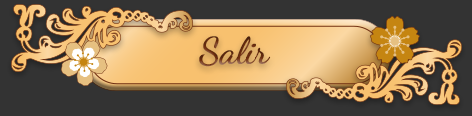
<style>
.page{position:relative;width:472px;height:116px;background:#333333}
.page>*{position:absolute;margin:0}
.t1{font:37.3px "DancingScript-Bold"}
</style>
<div class="page">
<p class="t1" style="left:199px;top:36px;width:72px;height:31px">Salir</p>
</div>
